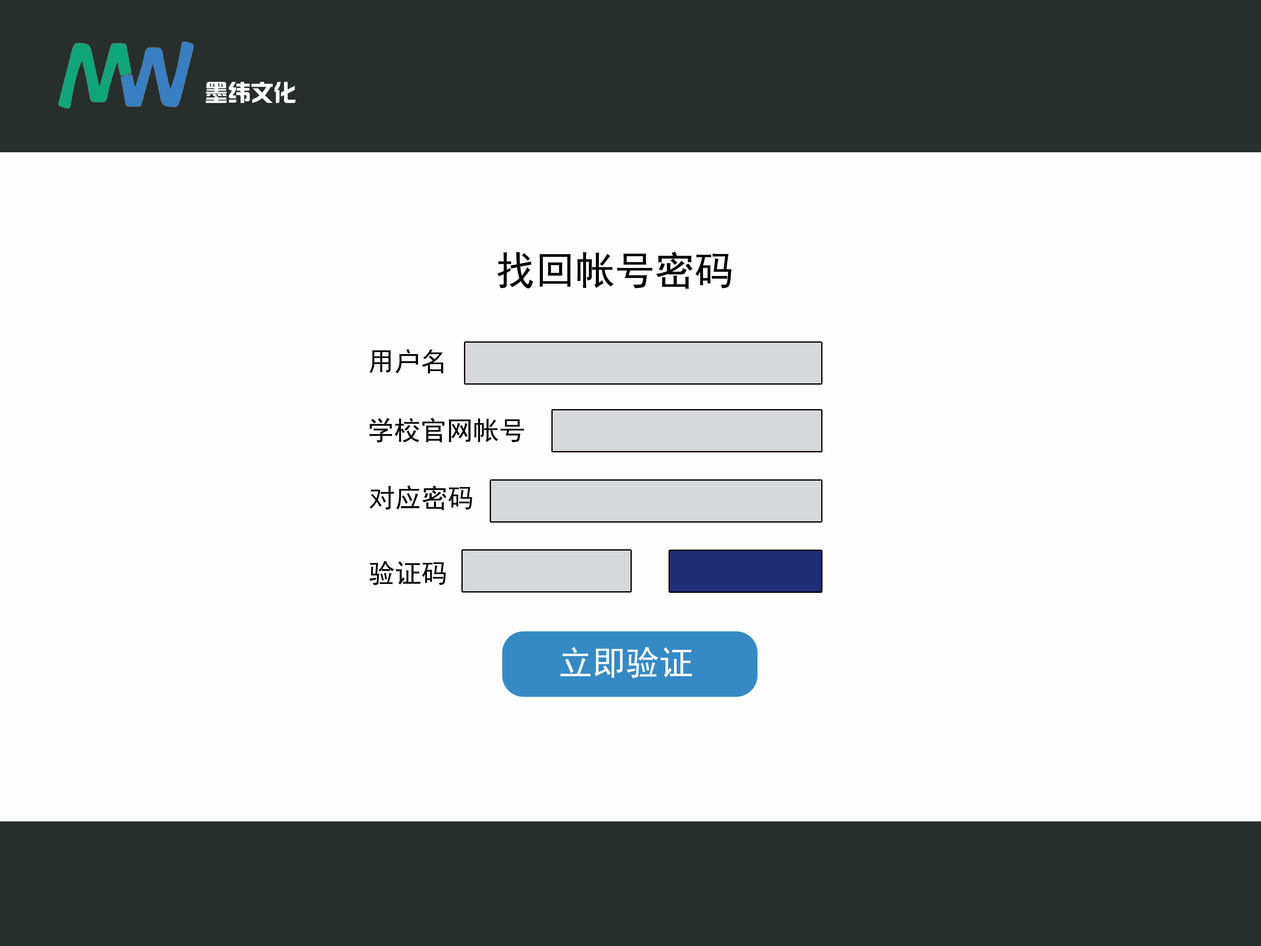
<style>
.page{position:relative;width:1261px;height:946px;background:#fefefe}
.page>*{position:absolute;margin:0}
.t1{font:22.9px "¹ã½Ý¾ÓÃÔÄã×Ö¿â";color:#fdfdfd}
.t2{font:39.7px "SimHei";color:#000000}
.t3{font:26.3px "SimHei";color:#000000}
.t4{font:33.6px "SimHei";color:#fefefe}
</style>
<div class="page">
<p class="t1" style="left:206px;top:82px;width:90px;height:21px">墨纬文化</p>
<p class="t2" style="left:497px;top:252px;width:235px;height:37px">找回帐号密码</p>
<p class="t3" style="left:369px;top:349px;width:74px;height:24px">用户名</p>
<p class="t3" style="left:369px;top:418px;width:155px;height:24px">学校官网帐号</p>
<p class="t3" style="left:370px;top:485px;width:102px;height:25px">对应密码</p>
<p class="t3" style="left:369px;top:561px;width:77px;height:24px">验证码</p>
<p class="t4" style="left:560px;top:647px;width:132px;height:31px">立即验证</p>
</div>
